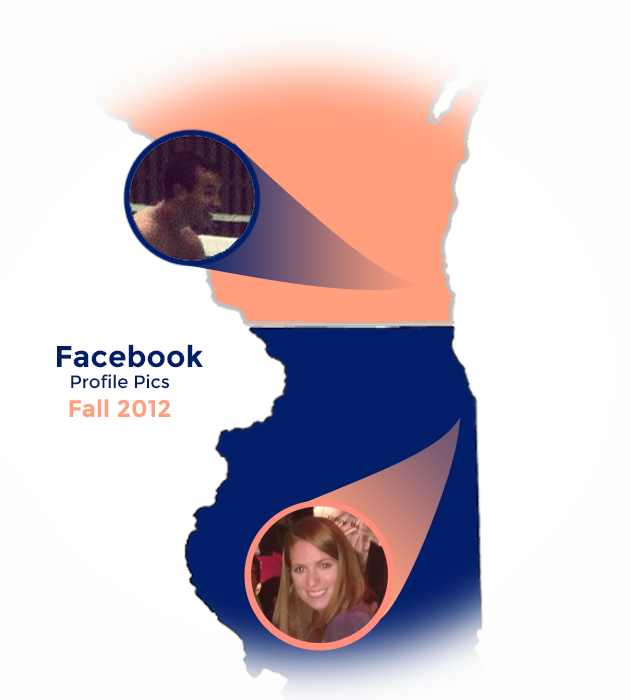
<style>
.page{position:relative;width:631px;height:700px;background:#ffffff}
.page>*{position:absolute;margin:0}
.t1{font:18px "Montserrat-Regular";color:#021e69}
.t2{font:30px "Montserrat-Bold";color:#021e69}
.t3{font:24px "Montserrat-Bold";color:#ff9f7d}
</style>
<div class="page">
<p class="t1" style="left:57px;top:344px;width:146px;height:74px"><span class="t2">Facebook<br></span>   Profile Pics<br><span class="t3">  Fall 2012</span></p>
</div>
